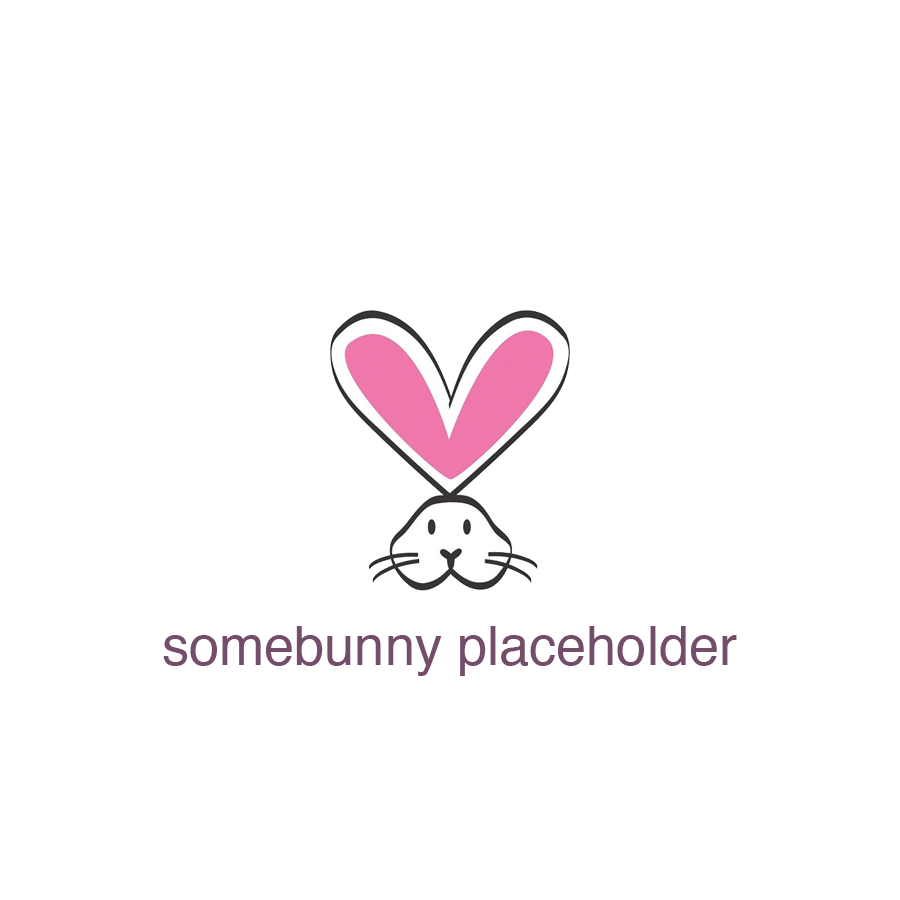
<style>
.page{position:relative;width:900px;height:900px;background:#ffffff}
.page>*{position:absolute;margin:0}
.t1{font:54.2px "Helvetica";color:#734d69}
</style>
<div class="page">
<p class="t1" style="left:163px;top:626px;width:574px;height:50px">somebunny placeholder</p>
</div>
